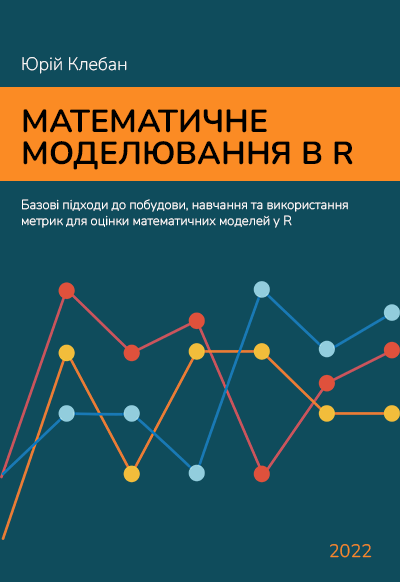
<style>
.page{position:relative;width:400px;height:582px;background:#0f4c5c}
.page>*{position:absolute;margin:0}
.t1{font:18px "Nunito-ExtraLight";color:#ffffff}
.t2{font:32px/32px "Nunito-Bold";color:#000000;text-transform:uppercase}
.t3{font:13px/16px "Nunito-ExtraLight";color:#ffffff}
.t4{font:18px "Nunito-Light";color:#fb8b24;text-transform:uppercase}
</style>
<div class="page">
<p class="t1" style="left:22px;top:57px;width:105px;height:17px">Юрій Клебан</p>
<p class="t2" style="left:23px;top:109px;width:330px;height:61px">Математичне моделювання в R</p>
<p class="t3" style="left:22px;top:199px;width:326px;height:29px">Базові підходи до побудови, навчання та використання метрик для оцінки математичних моделей у R</p>
<p class="t4" style="left:330px;top:544px;width:42px;height:14px">2022</p>
</div>
